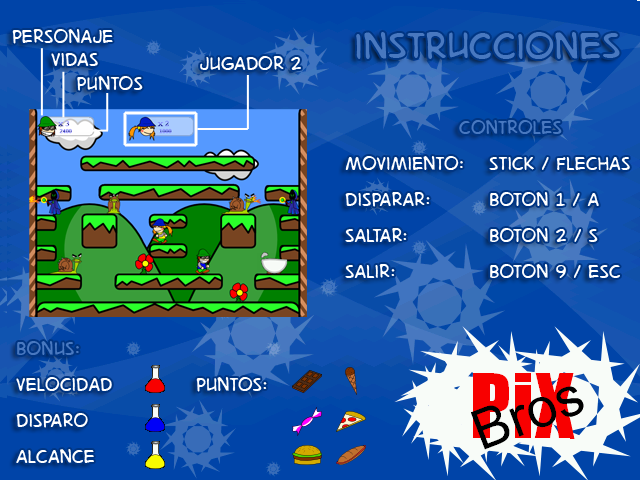
<style>
.page{position:relative;width:640px;height:480px}
.page>*{position:absolute;margin:0}
.t1{font:24px "DigitalStrip.BB";color:#ffffff}
.t2{font:48px "DigitalStrip.BB";color:#4878c0}
.t3{font:24px/36px "DigitalStrip.BB";color:#ffffff}
.t4{font:24px/36px "DigitalStrip.BB";color:#4878c0}
</style>
<div class="page">
<p class="t1" style="left:12px;top:29px;width:101px;height:15px">personaje</p>
<p class="t2" style="left:356px;top:32px;width:264px;height:27px">instrucciones</p>
<p class="t1" style="left:51px;top:53px;width:47px;height:13px">vidas</p>
<p class="t1" style="left:200px;top:56px;width:101px;height:14px">jugador 2</p>
<p class="t1" style="left:77px;top:76px;width:66px;height:15px">puntos</p>
<p class="t3" style="left:345px;top:120px;width:285px;height:158px;text-align:center"><span class="t4">controles<br></span>movimiento:  stick / flechas<br>disparar:  boton 1 / a<br>saltar:    Boton 2 / s<br>Salir:   boton 9 / Esc</p>
<p class="t3" style="left:16px;top:341px;width:251px;height:122px"><span class="t4">Bonus:<br></span>Velocidad   puntos:<br>Disparo<br>alcance</p>
</div>
